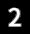
<style>
.page{position:relative;width:30px;height:34px;background:#000000}
.page>*{position:absolute;margin:0}
.t1{font:24px "WebPSD-18463539-0-Regular";color:#ffffff;font-weight:bold}
</style>
<div class="page">
<p class="t1" style="left:0px;top:0px;width:30px;height:34px">2</p>
</div>
